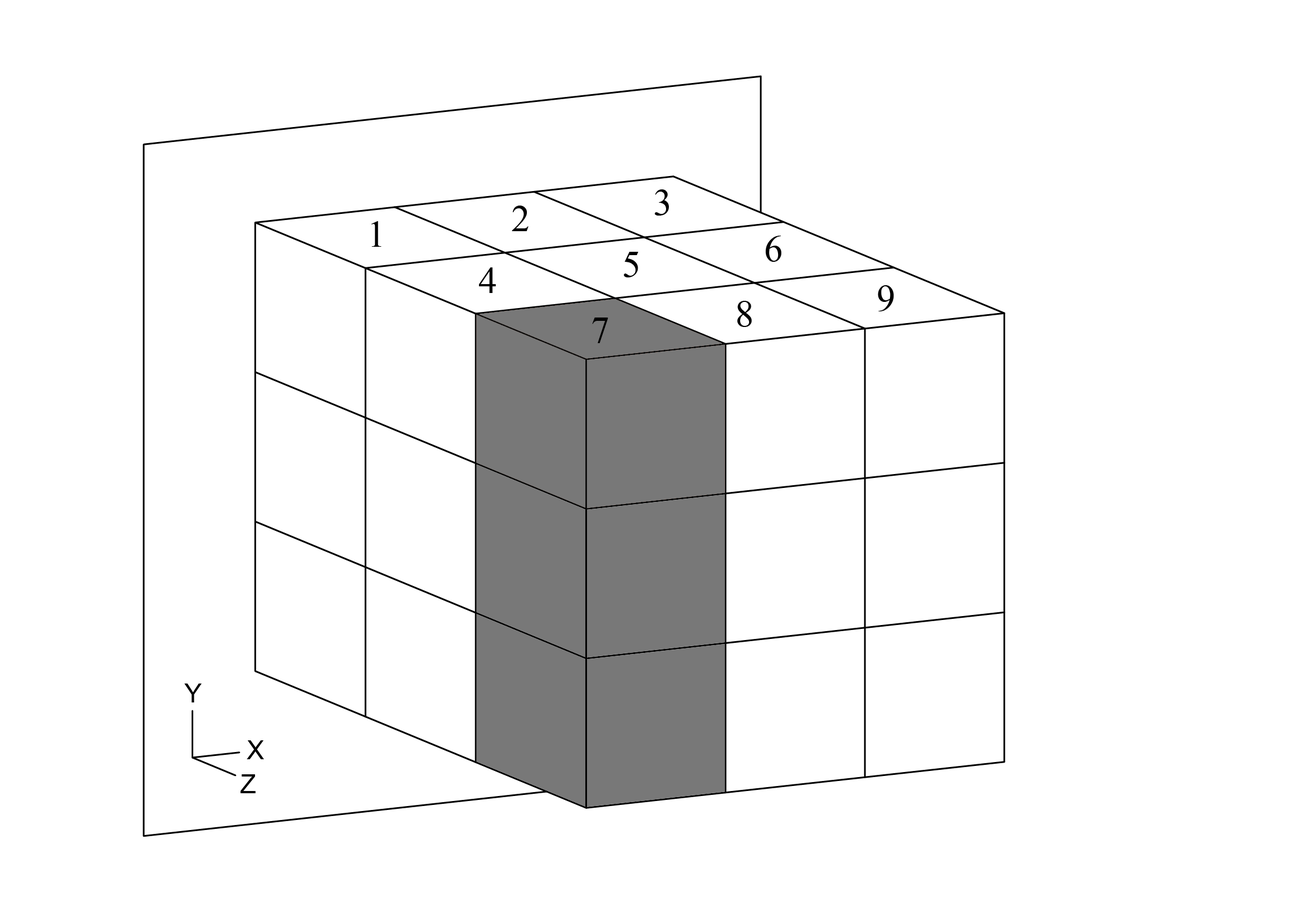
<style>
.page{position:relative;width:1306px;height:913px;background:#ffffff}
.page>*{position:absolute;margin:0}
.t1{font:37.1px "TimesNewRomanPSMT";color:#000000}
</style>
<div class="page">
<p class="t1" style="left:654px;top:189px;width:15px;height:27px">3</p>
<p class="t1" style="left:512px;top:206px;width:17px;height:25px">2</p>
<p class="t1" style="left:372px;top:221px;width:10px;height:26px">1</p>
<p class="t1" style="left:765px;top:236px;width:16px;height:26px">6</p>
<p class="t1" style="left:624px;top:252px;width:14px;height:25px">5</p>
<p class="t1" style="left:479px;top:267px;width:17px;height:26px">4</p>
<p class="t1" style="left:878px;top:285px;width:16px;height:26px">9</p>
<p class="t1" style="left:737px;top:301px;width:15px;height:26px">8</p>
<p class="t1" style="left:592px;top:317px;width:16px;height:26px">7</p>
</div>
